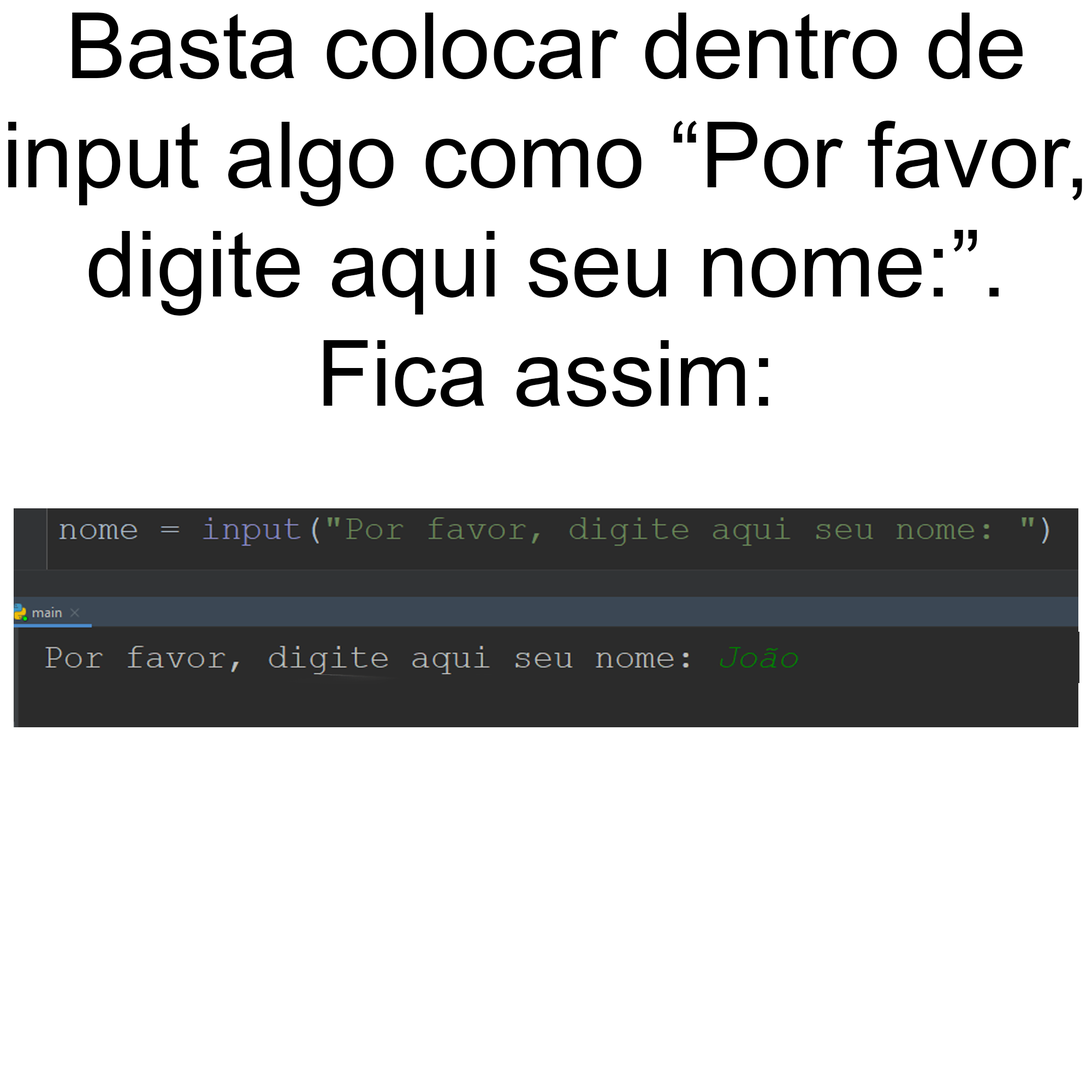
<style>
.page{position:relative;width:1092px;height:1092px;background:#ffffff}
.page>*{position:absolute;margin:0}
.t1{font:91px "ArialMT";color:#000000}
</style>
<div class="page">
<p class="t1" style="left:8px;top:13px;width:1074px;height:394px;text-align:center">Basta colocar dentro de<br>input algo como “Por favor,<br>digite aqui seu nome:”.<br>Fica assim:</p>
</div>
